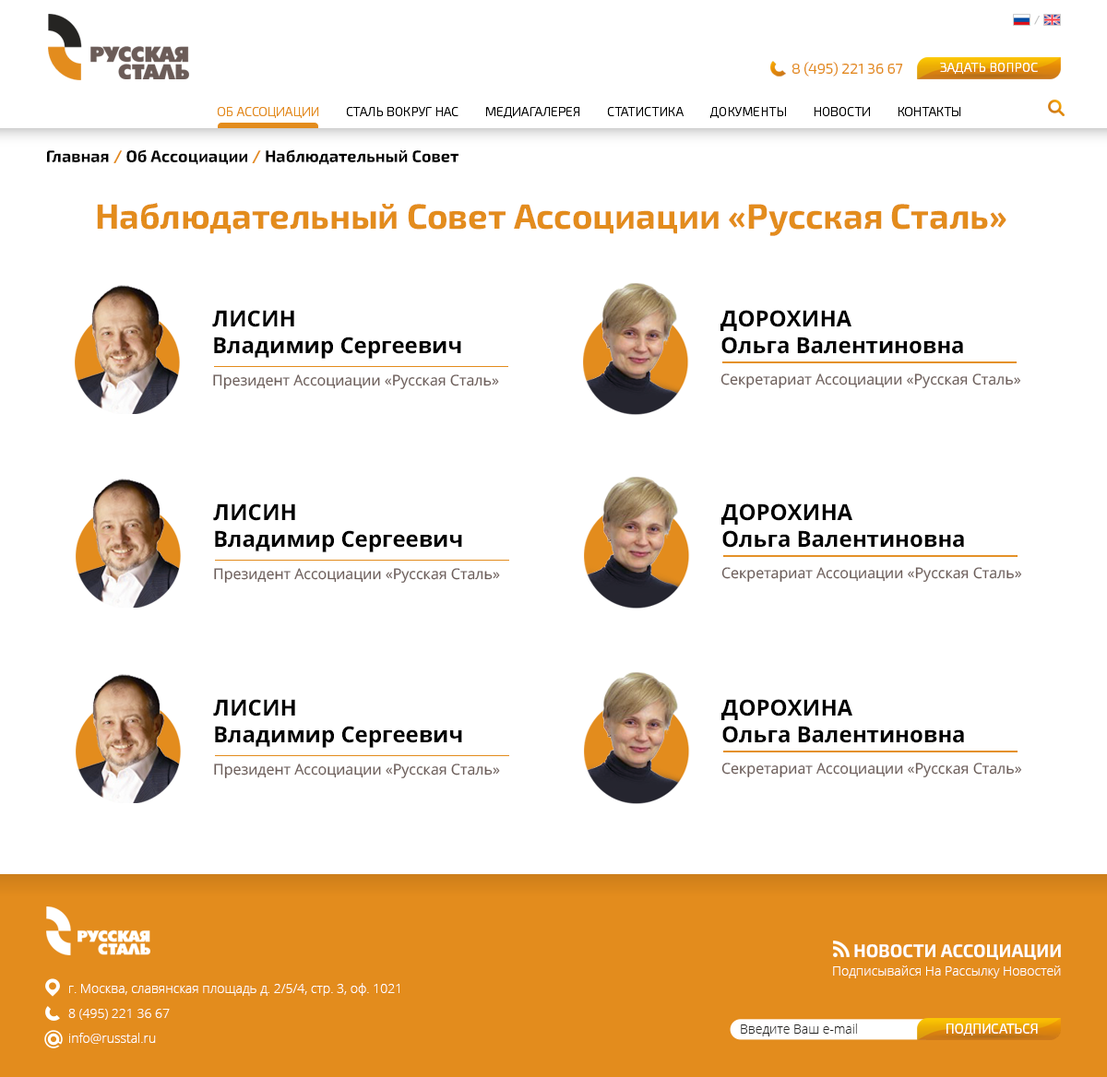
<style>
.page{position:relative;width:1107px;height:1077px;background:#ffffff}
.page>*{position:absolute;margin:0}
.t1{font:11.1px "Exo2.0-Medium";color:#c3c3c3}
.t2{font:14.8px "Exo2.0-Light";color:#e38c1d}
.t3{font:13px "Exo2.0-Light";color:#ffffff}
.t4{font:12.9px "Exo2.0-Light";color:#000000}
.t5{font:12.9px "Exo2.0-Light";color:#e38c1d}
.t6{font:16.6px "Exo2.0-Bold";color:#000000}
.t7{font:16.6px "Exo2.0-Bold";color:#e38c1d}
.t8{font:35.1px "Exo2.0-Bold";color:#e38c1d}
.t9{font:22.1px "OpenSans-Bold";color:#000000}
.t10{font:22.1px "OpenSans-Bold";color:#000000;text-transform:uppercase}
.t11{font:14.8px "OpenSans";color:#6b5c58}
.t12{font:18.2px "Exo2.0-Bold";color:#ffffff}
.t13{font:12.9px "OpenSans-Light";color:#ffffff}
.t14{font:12.9px/24.9px "OpenSans-Light";color:#ffffff}
.t15{font:12.9px "OpenSans-Light";color:#252422}
.t16{font:13.6px "Exo2.0-Light";color:#ffffff}
</style>
<div class="page">
<p class="t1" style="left:1034px;top:16px;width:6px;height:9px">/</p>
<p class="t2" style="left:792px;top:62px;width:111px;height:15px">8 (495) 221 36 67</p>
<p class="t3" style="left:940px;top:63px;width:98px;height:12px">ЗАДАТЬ ВОПРОС</p>
<p class="t4" style="left:217px;top:106px;width:744px;height:13px"><span class="t5">ОБ АССОЦИАЦИИ</span>         СТАЛЬ ВОКРУГ НАС         МЕДИАГАЛЕРЕЯ         СТАТИСТИКА         ДОКУМЕНТЫ         НОВОСТИ         КОНТАКТЫ</p>
<p class="t6" style="left:47px;top:149px;width:411px;height:16px">Главная <span class="t7">/</span> Об Ассоциации <span class="t7">/</span> Наблюдательный Совет</p>
<p class="t8" style="left:97px;top:203px;width:909px;height:33px">Наблюдательный Совет Ассоциации «Русская Сталь»</p>
<p class="t9" style="left:212px;top:310px;width:249px;height:49px">ЛИСИН<br>Владимир Сергеевич</p>
<p class="t9" style="left:720px;top:310px;width:243px;height:44px"><span class="t10">Дорохина<br></span>Ольга Валентиновна</p>
<p class="t11" style="left:213px;top:374px;width:286px;height:15px">Президент Ассоциации «Русская Сталь»</p>
<p class="t11" style="left:720px;top:374px;width:301px;height:14px">Секретариат Ассоциации «Русская Сталь»</p>
<p class="t9" style="left:213px;top:504px;width:249px;height:48px">ЛИСИН<br>Владимир Сергеевич</p>
<p class="t9" style="left:721px;top:504px;width:243px;height:44px"><span class="t10">Дорохина<br></span>Ольга Валентиновна</p>
<p class="t11" style="left:214px;top:568px;width:286px;height:15px">Президент Ассоциации «Русская Сталь»</p>
<p class="t11" style="left:721px;top:567px;width:301px;height:15px">Секретариат Ассоциации «Русская Сталь»</p>
<p class="t9" style="left:213px;top:699px;width:249px;height:49px">ЛИСИН<br>Владимир Сергеевич</p>
<p class="t9" style="left:721px;top:699px;width:243px;height:44px"><span class="t10">Дорохина<br></span>Ольга Валентиновна</p>
<p class="t11" style="left:214px;top:764px;width:286px;height:14px">Президент Ассоциации «Русская Сталь»</p>
<p class="t11" style="left:721px;top:763px;width:301px;height:15px">Секретариат Ассоциации «Русская Сталь»</p>
<p class="t12" style="left:854px;top:945px;width:207px;height:15px">НОВОСТИ АССОЦИАЦИИ</p>
<p class="t13" style="left:833px;top:966px;width:228px;height:13px">Подписывайся На Рассылку Новостей</p>
<p class="t14" style="left:68px;top:983px;width:331px;height:61px">г. Москва, славянская площадь д. 2/5/4, стр. 3, оф. 1021<br>8 (495) 221 36 67<br>info@russtal.ru</p>
<p class="t15" style="left:741px;top:1024px;width:116px;height:13px">Введите Ваш e-mail</p>
<p class="t16" style="left:946px;top:1024px;width:92px;height:12px">ПОДПИСАТЬСЯ</p>
</div>
